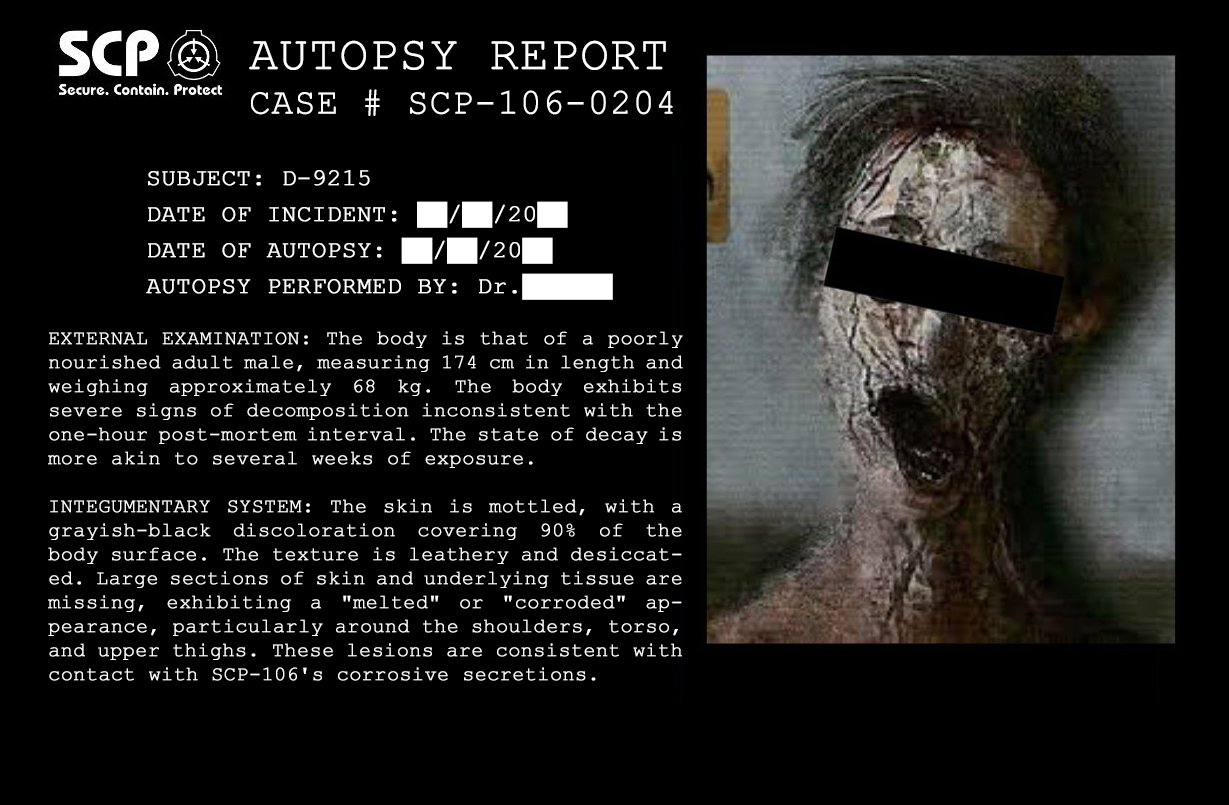
<style>
.page{position:relative;width:1229px;height:805px;background:#000000}
.page>*{position:absolute;margin:0}
.t1{font:48px "CourierNewPSMT";color:#ffffff;font-weight:bold}
.t2{font:36px "CourierNewPSMT";color:#ffffff;font-weight:bold}
.t3{font:24px/18px "CourierNewPSMT";color:#ffffff;font-weight:bold}
.t4{font:20px/24px "CourierNewPSMT";color:#ffffff;font-weight:bold}
.t5{font:16px/18px "CourierNewPSMT";color:#ffffff;font-weight:bold}
</style>
<div class="page">
<p class="t1" style="left:249px;top:40px;width:417px;height:30px">AUTOPSY REPORT</p>
<p class="t2" style="left:251px;top:89px;width:422px;height:27px">CASE # SCP-106-0204</p>
<p class="t3" style="left:146px;top:170px;width:467px;height:130px">SUBJECT: D-9215<br><br>DATE OF INCIDENT: ██/██/20██<br><br>DATE OF AUTOPSY: ██/██/20██<br><br>AUTOPSY PERFORMED BY: Dr.██████</p>
<p class="t4" style="left:48px;top:331px;width:635px;height:350px"><span class="t5"><br><br><br></span>EXTERNAL EXAMINATION: The body is that of a poorly nourished adult male, measuring 174 cm in length and weighing approximately 68 kg. The body exhibits severe signs of decomposition inconsistent with the one-hour post-mortem interval. The state of decay is more akin to several weeks of exposure.<br><br>INTEGUMENTARY SYSTEM: The skin is mottled, with a grayish-black discoloration covering 90% of the body surface. The texture is leathery and desiccated. Large sections of skin and underlying tissue are missing, exhibiting a "melted" or "corroded" appearance, particularly around the shoulders, torso, and upper thighs. These lesions are consistent with contact with SCP-106's corrosive secretions.</p>
</div>
